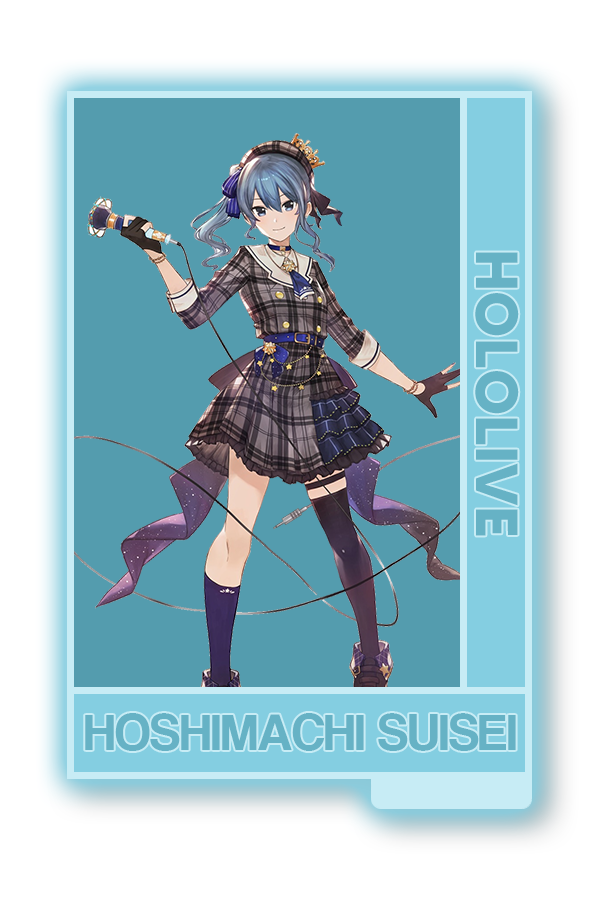
<style>
.page{position:relative;width:600px;height:900px;background:#549cae}
.page>*{position:absolute;margin:0}
.t1{font:59.2px "MADETOMMY-Bold";color:#66b2c5}
.t2{font:52.9px "CoolveticaRg-Regular";color:#66b2c5}
</style>
<div class="page">
<p class="t1" style="left:475px;top:252px;width:44px;height:284px;rotate:90deg">HOLOLIVE</p>
<p class="t2" style="left:85px;top:713px;width:431px;height:38px">HOSHIMACHI SUISEI</p>
</div>
